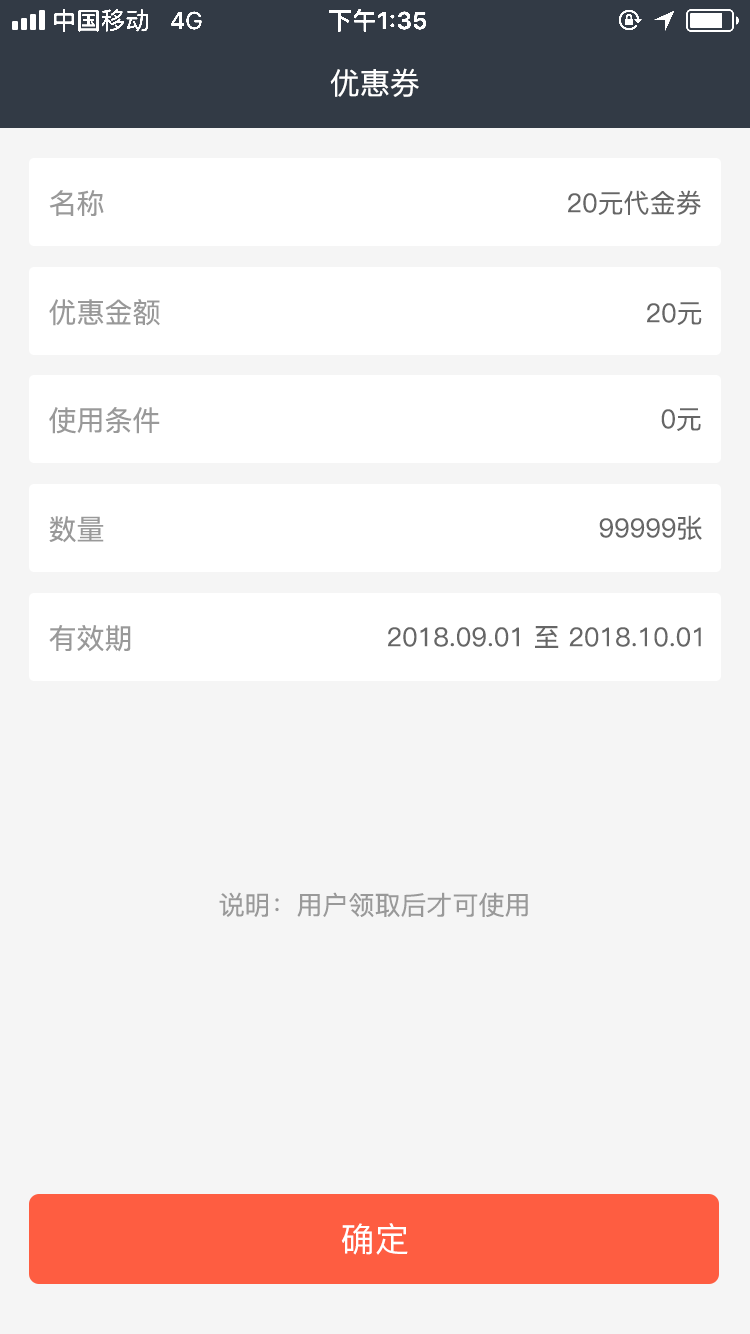
<style>
.page{position:relative;width:750px;height:1334px;background:#f5f5f5}
.page>*{position:absolute;margin:0}
.t1{font:30px "PingFang-SC-Medium";color:#ffffff}
.t2{font:28px "PingFang-SC-Medium";color:#999999}
.t3{font:26px "PingFang-SC-Medium";color:#666666}
.t4{font:26px "PingFang-SC-Medium";color:#999999}
.t5{font:34px "PingFang-SC-Medium";letter-spacing:0.02em;color:#ffffff}
</style>
<div class="page">
<p class="t1" style="left:330px;top:68px;width:89px;height:29px">优惠券</p>
<p class="t2" style="left:49px;top:190px;width:55px;height:26px">名称</p>
<p class="t3" style="left:568px;top:190px;width:133px;height:25px">20元代金劵</p>
<p class="t2" style="left:49px;top:299px;width:111px;height:27px">优惠金额</p>
<p class="t3" style="left:647px;top:302px;width:55px;height:23px">20元</p>
<p class="t2" style="left:49px;top:407px;width:111px;height:27px">使用条件</p>
<p class="t3" style="left:661px;top:408px;width:40px;height:23px">0元</p>
<p class="t2" style="left:49px;top:516px;width:55px;height:27px">数量</p>
<p class="t3" style="left:599px;top:515px;width:103px;height:25px">99999张</p>
<p class="t2" style="left:49px;top:625px;width:82px;height:27px">有效期</p>
<p class="t3" style="left:388px;top:626px;width:313px;height:22px">2018.09.01 至 2018.10.01</p>
<p class="t4" style="left:219px;top:892px;width:309px;height:25px">说明：用户领取后才可使用</p>
<p class="t5" style="left:341px;top:1223px;width:67px;height:32px">确定</p>
</div>
